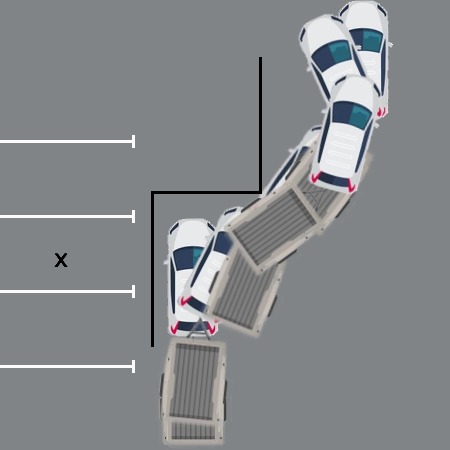
<style>
.page{position:relative;width:450px;height:450px;background:#818486}
.page>*{position:absolute;margin:0}
.t1{font:24px "DejaVuSans";color:#000000}
</style>
<div class="page">
<p class="t1" style="left:54px;top:253px;width:14px;height:14px">x</p>
<p class="t1" style="left:54px;top:253px;width:14px;height:14px">x</p>
<p class="t1" style="left:54px;top:253px;width:14px;height:14px">x</p>
<p class="t1" style="left:54px;top:253px;width:14px;height:14px">x</p>
<p class="t1" style="left:54px;top:253px;width:14px;height:14px">x</p>
<p class="t1" style="left:54px;top:253px;width:14px;height:14px">x</p>
</div>
